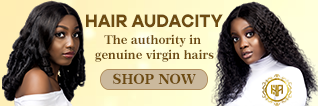
<style>
.page{position:relative;width:318px;height:106px}
.page>*{position:absolute;margin:0}
.t1{font:18.5px "GalanoGrotesqueDEMO-Bold";color:#6d4b11;scale:0.95 1}
.t2{font:12.2px "Century751BT-BoldB";color:#6d4b11;scale:0.96 1}
.t3{font:13.9px "Century751BT-BoldB";color:#6d4b11}
</style>
<div class="page">
<p class="t1" style="left:86px;top:14px;width:137px;height:14px">HAIR AUDACITY</p>
<p class="t2" style="left:95px;top:34px;width:119px;height:28px;text-align:center">The authority in <br>genuine virgin hairs</p>
<p class="t3" style="left:113px;top:73px;width:83px;height:11px">SHOP NOW</p>
</div>
